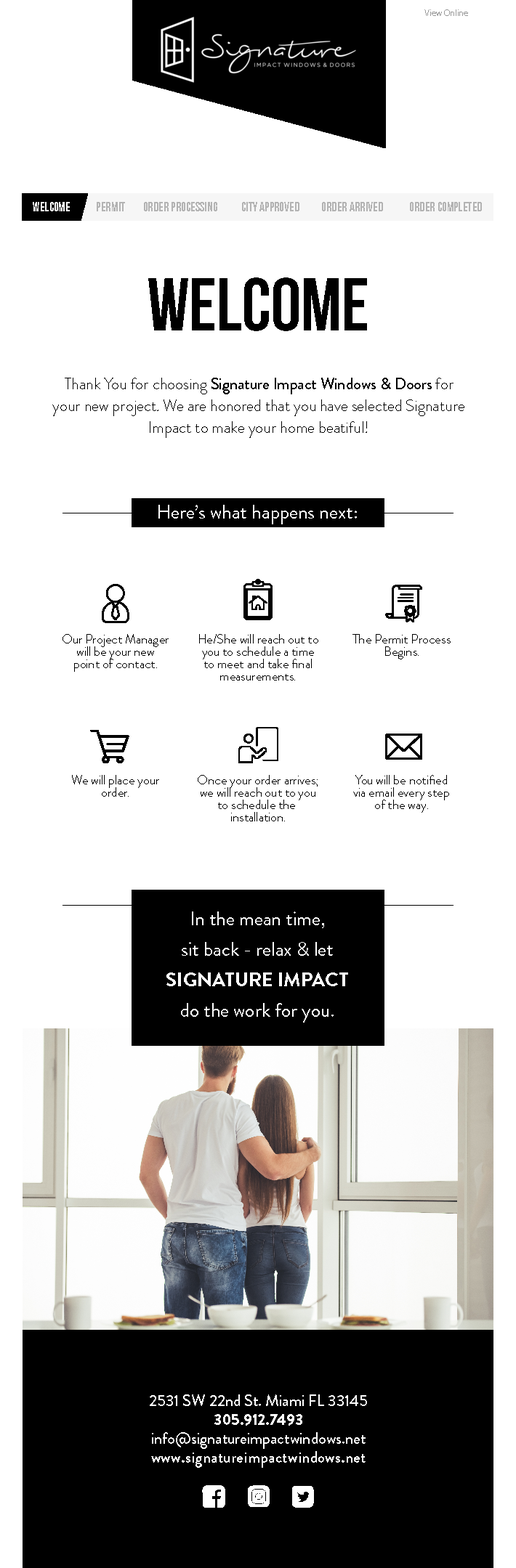
<style>
.page{position:relative;width:516px;height:1568px;background:#ffffff}
.page>*{position:absolute;margin:0}
.t1{font:8.7px "MyriadPro-Regular";color:#999999}
.t2{font:75.1px "BebasNeueBold";color:#000000}
.t3{font:16px/21.8px "BrandonGrotesque-Light";color:#000000}
.t4{font:16px/21.8px "BrandonGrotesque-Medium";color:#000000}
.t5{font:19.6px "BrandonGrotesque-Regular";color:#ffffff}
.t6{font:12.7px/12.3px "BrandonGrotesque-Light";color:#000000}
.t7{font:19.6px/30.5px "BrandonGrotesque-Regular";color:#ffffff}
.t8{font:19.6px/30.5px "BrandonGrotesque-Bold";color:#ffffff}
.t9{font:16px/18.9px "BrandonGrotesque-Medium";color:#ffffff}
.t10{font:16px/18.9px "BrandonGrotesque-Black";color:#ffffff}
.t11{font:16px/18.9px "BrandonGrotesque-Bold";letter-spacing:0.015em;color:#ffffff}
</style>
<div class="page">
<p class="t1" style="left:424px;top:9px;width:44px;height:7px">View Online</p>
<p class="t2" style="left:148px;top:277px;width:219px;height:54px">WELCOME</p>
<p class="t3" style="left:52px;top:378px;width:412px;height:60px;text-align:center">Thank You for choosing <span class="t4">Signature Impact Windows &amp; Doors</span> for<br>your new project. We are honored that you have selected Signature<br>Impact to make your home beatiful!</p>
<p class="t5" style="left:158px;top:505px;width:199px;height:19px">Here’s what happens next:</p>
<p class="t6" style="left:62px;top:634px;width:106px;height:38px;text-align:center">Our Project Manager<br>will be your new<br>point of contact.</p>
<p class="t6" style="left:199px;top:634px;width:119px;height:47px;text-align:center">He/She will reach out to<br>you to schedule a time<br>to meet and take final<br>measurements.</p>
<p class="t6" style="left:352px;top:634px;width:98px;height:25px;text-align:center">The Permit Process<br>Begins.</p>
<p class="t6" style="left:72px;top:775px;width:87px;height:22px;text-align:center">We will place your<br>order.</p>
<p class="t6" style="left:198px;top:775px;width:119px;height:46px;text-align:center">Once your order arrives;<br>we will reach out to you<br>to schedule the <br>installation.</p>
<p class="t6" style="left:353px;top:775px;width:96px;height:38px;text-align:center">You will be notified<br>via email every step<br>of the way.</p>
<p class="t7" style="left:166px;top:911px;width:182px;height:112px;text-align:center">In the mean time,<br>sit back - relax &amp; let<br><span class="t8">SIGNATURE IMPACT<br></span>do the work for you.</p>
<p class="t9" style="left:150px;top:1394px;width:217px;height:74px;text-align:center">2531 SW 22nd St. Miami FL 33145<br><span class="t10">305.912.7493<br></span>info@signatureimpactwindows.net<br><span class="t11">www.signatureimpactwindows.net</span></p>
</div>
